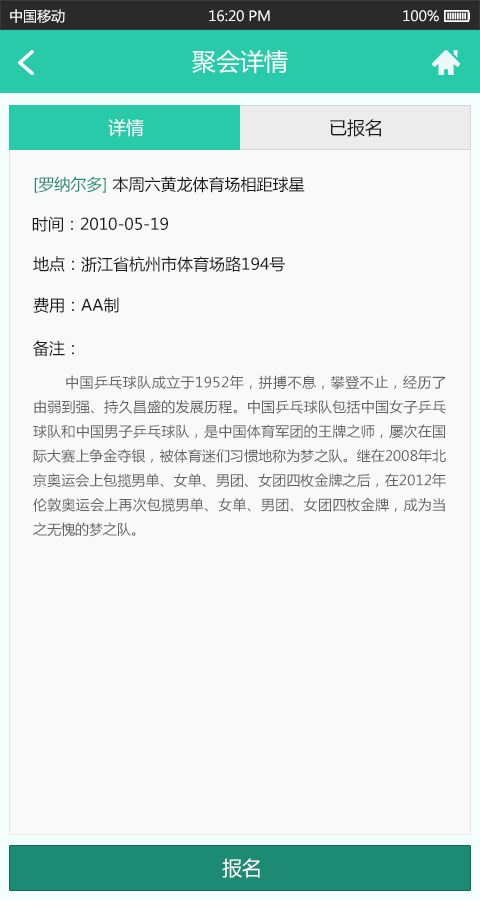
<style>
.page{position:relative;width:480px;height:900px;background:#f9f9f9}
.page>*{position:absolute;margin:0}
.t1{font:14px "MicrosoftYaHei";color:#ffffff}
.t2{font:24px "MicrosoftYaHei";color:#f4fffd}
.t3{font:18px "MicrosoftYaHei";color:#ffffff}
.t4{font:18px "MicrosoftYaHei";color:#191919}
.t5{font:16px "MicrosoftYaHei";color:#191919}
.t6{font:16px "MicrosoftYaHei";color:#1d8a74}
.t7{font:14px "MicrosoftYaHei";color:#626262}
.t8{font:20px "MicrosoftYaHei";color:#ffffff}
</style>
<div class="page">
<p class="t1" style="left:10px;top:9px;width:55px;height:14px">中国移动</p>
<p class="t1" style="left:209px;top:10px;width:61px;height:12px">16:20 PM</p>
<p class="t1" style="left:403px;top:10px;width:36px;height:12px">100%</p>
<p class="t2" style="left:192px;top:50px;width:96px;height:24px">聚会详情</p>
<p class="t3" style="left:108px;top:118px;width:36px;height:19px">详情</p>
<p class="t4" style="left:330px;top:119px;width:51px;height:18px">已报名</p>
<p class="t5" style="left:34px;top:176px;width:271px;height:17px"><span class="t6">[罗纳尔多] </span>本周六黄龙体育场相距球星</p>
<p class="t5" style="left:32px;top:216px;width:136px;height:16px">时间：2010-05-19</p>
<p class="t5" style="left:33px;top:256px;width:252px;height:16px">地点：浙江省杭州市体育场路194号</p>
<p class="t5" style="left:33px;top:297px;width:86px;height:16px">费用：AA制</p>
<p class="t5" style="left:33px;top:340px;width:41px;height:17px">备注：</p>
<p class="t7" style="left:33px;top:375px;width:413px;height:162px;text-align:justify">中国乒乓球队成立于1952年，拼搏不息，攀登不止，经历了由弱到强、持久昌盛的发展历程。中国乒乓球队包括中国女子乒乓球队和中国男子乒乓球队，是中国体育军团的王牌之师，屡次在国际大赛上争金夺银，被体育迷们习惯地称为梦之队。继在2008年北京奥运会上包揽男单、女单、男团、女团四枚金牌之后，在2012年伦敦奥运会上再次包揽男单、女单、男团、女团四枚金牌，成为当之无愧的梦之队。</p>
<p class="t8" style="left:222px;top:858px;width:38px;height:20px">报名</p>
</div>
